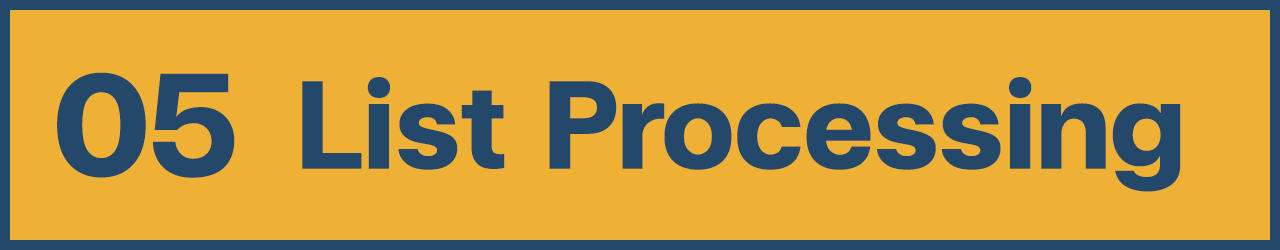
<style>
.page{position:relative;width:1280px;height:250px;background:#efb036}
.page>*{position:absolute;margin:0}
.t1{font:200px "FCMinimalBold";color:#23486a}
.t2{font:170px "FCMinimalBold";color:#23486a}
</style>
<div class="page">
<p class="t1" style="left:57px;top:72px;width:178px;height:106px">05</p>
<p class="t2" style="left:302px;top:77px;width:879px;height:115px">List Processing</p>
</div>
